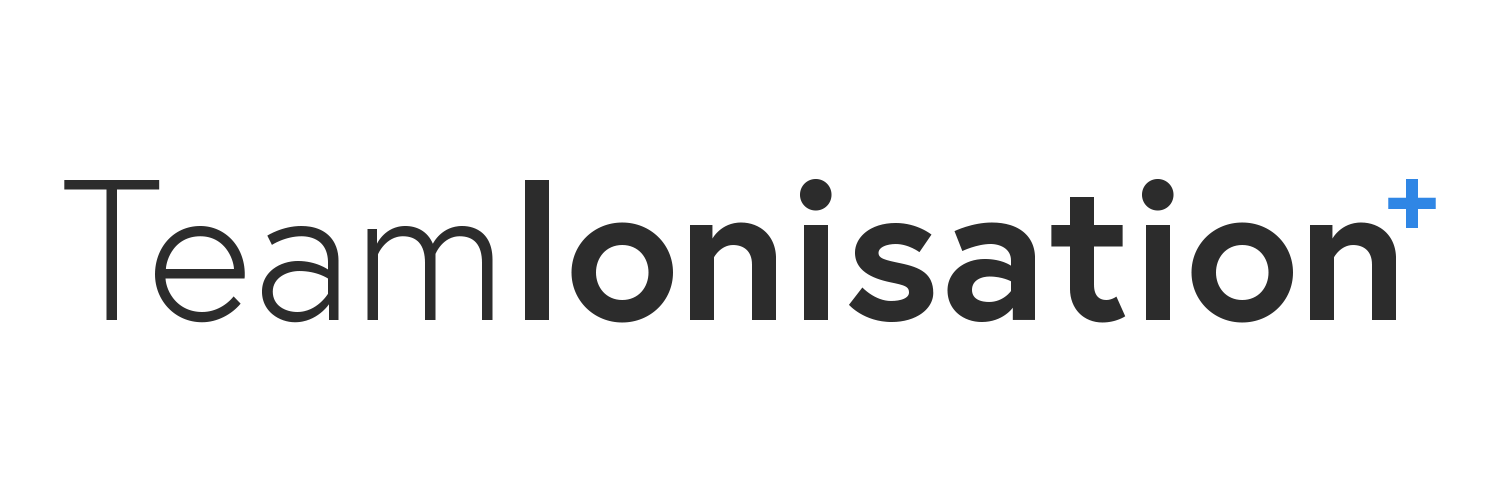
<style>
.page{position:relative;width:1500px;height:500px;background:#ffffff}
.page>*{position:absolute;margin:0}
.t1{font:200px "Europa-Bold";color:#2c2c2c}
.t2{font:200px "Europa-Light";color:#2c2c2c}
.t3{font:100px "Europa-Bold";color:#2f86e5}
</style>
<div class="page">
<p class="t1" style="left:64px;top:179px;width:1332px;height:144px"><span class="t2">Team</span>Ionisation</p>
<p class="t3" style="left:1388px;top:179px;width:48px;height:49px">+</p>
</div>
